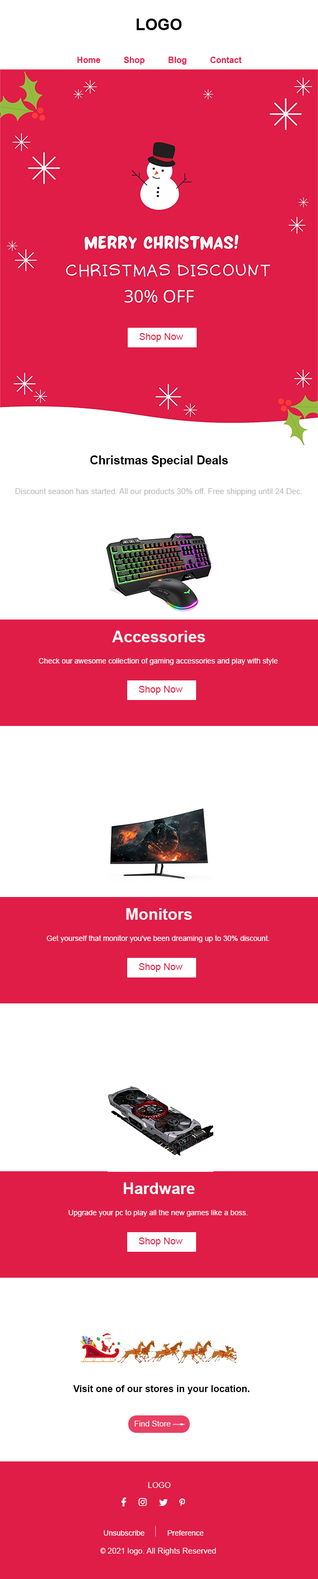
<style>
.page{position:relative;width:318px;height:1579px;background:#ffffff}
.page>*{position:absolute;margin:0}
.t1{font:15.9px "Arial-BoldMT";color:#000000}
.t2{font:8.5px "Arial-BoldMT";color:#e01d47}
.t3{font:9.5px "ArialMT";color:#e01d47}
.t4{font:11.9px "Arial-BoldMT";color:#000000}
.t5{font:7.9px "ArialMT";color:#b6b6b6}
.t6{font:15.9px "Arial-BoldMT";color:#ffffff}
.t7{font:7.4px "ArialMT";color:#ffffff}
.t8{font:9.5px "Arial-BoldMT";color:#000000}
.t9{font:7.9px "ArialMT";color:#ffffff}
.t10{font:7.9px "ArialNarrow";color:#ffffff}
</style>
<div class="page">
<p class="t1" style="left:136px;top:19px;width:46px;height:11px">LOGO</p>
<p class="t2" style="left:77px;top:57px;width:164px;height:8px">Home Shop Blog Contact</p>
<p class="t3" style="left:139px;top:333px;width:44px;height:9px">Shop Now</p>
<p class="t4" style="left:90px;top:455px;width:138px;height:12px">Christmas Special Deals</p>
<p class="t5" style="left:15px;top:488px;width:287px;height:8px">Discount season has started. All our products 30% off. Free shipping until 24 Dec.</p>
<p class="t6" style="left:112px;top:631px;width:93px;height:11px">Accessories</p>
<p class="t7" style="left:39px;top:658px;width:238px;height:7px">Check our awesome collection of gaming accessories and play with style</p>
<p class="t3" style="left:139px;top:686px;width:44px;height:9px">Shop Now</p>
<p class="t6" style="left:126px;top:908px;width:66px;height:12px">Monitors</p>
<p class="t7" style="left:47px;top:935px;width:222px;height:7px">Get yourself that monitor you've been dreaming up to 30% discount.</p>
<p class="t3" style="left:139px;top:963px;width:44px;height:9px">Shop Now</p>
<p class="t6" style="left:123px;top:1182px;width:71px;height:12px">Hardware</p>
<p class="t7" style="left:68px;top:1209px;width:179px;height:8px">Upgrade your pc to play all the new games like a boss.</p>
<p class="t3" style="left:139px;top:1237px;width:44px;height:9px">Shop Now</p>
<p class="t8" style="left:73px;top:1385px;width:176px;height:9px">Visit one of our stores in your location.</p>
<p class="t9" style="left:134px;top:1420px;width:36px;height:6px">Find Store</p>
<p class="t9" style="left:148px;top:1482px;width:22px;height:6px">LOGO</p>
<p class="t7" style="left:104px;top:1530px;width:41px;height:5px">Unsubscribe</p>
<p class="t7" style="left:167px;top:1530px;width:36px;height:5px">Preference</p>
<p class="t9" style="left:100px;top:1547px;width:116px;height:8px"><span class="t10">©</span> 2021 logo. All Rights Reserved</p>
</div>
